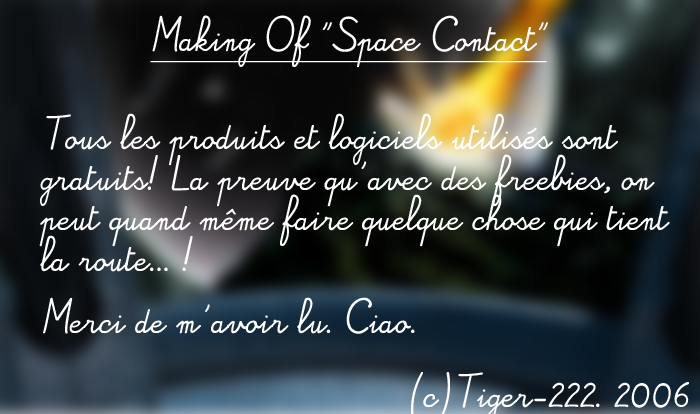
<style>
.page{position:relative;width:700px;height:414px}
.page>*{position:absolute;margin:0}
.t1{font:23.9px/20.5px "Alamain";color:#ffffff;text-decoration:underline}
.t2{font:23.9px/20.5px "Alamain";color:#ffffff}
</style>
<div class="page">
<p class="t1" style="left:150px;top:15px;width:398px;height:53px">Making Of "Space Contact"</p>
<p class="t2" style="left:39px;top:113px;width:631px;height:221px">Tous les produits et logiciels utilisés sont <br><br>gratuits! La preuve qu'avec des freebies, on <br><br>peut quand même faire quelque chose qui tient<br><br>la route... !<br><br><br>Merci de m'avoir lu. Ciao.</p>
</div>
